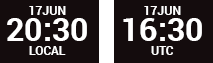
<style>
.page{position:relative;width:213px;height:63px;background:#140c0d}
.page>*{position:absolute;margin:0}
.t1{font:12px "Roboto-Bold";color:#ffffff;text-transform:uppercase}
.t2{font:32px "Roboto-Bold";color:#ffffff}
</style>
<div class="page">
<p class="t1" style="left:29px;top:6px;width:37px;height:9px">17Jun</p>
<p class="t1" style="left:144px;top:6px;width:37px;height:9px">17Jun</p>
<p class="t2" style="left:7px;top:18px;width:80px;height:23px">20:30</p>
<p class="t2" style="left:123px;top:18px;width:79px;height:23px">16:30</p>
<p class="t1" style="left:29px;top:46px;width:37px;height:9px">local</p>
<p class="t1" style="left:151px;top:46px;width:23px;height:9px">UTC</p>
</div>
